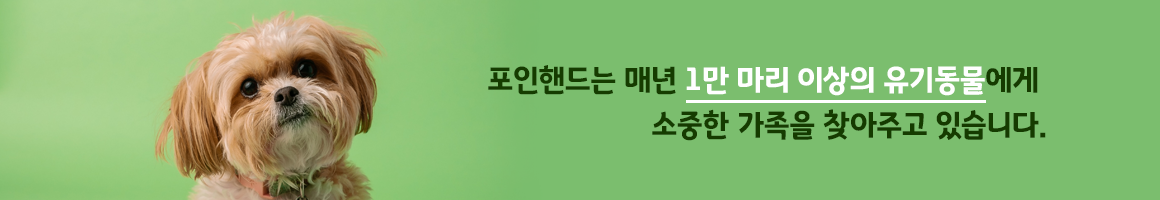
<style>
.page{position:relative;width:1160px;height:200px;background:#7bbe6e}
.page>*{position:absolute;margin:0}
.t1{font:31.8px/45px "GyeonggiTitleB";color:#153b00;scale:0.94 1}
.t2{font:31.8px/45px "GyeonggiTitleB";color:#153c00;scale:0.94 1}
.t3{font:31.8px/45px "GyeonggiTitleB";color:#ffffff;scale:0.94 1}
</style>
<div class="page">
<p class="t1" style="left:488px;top:65px;width:558px;height:76px;text-align:right"><span class="t2">포인핸드는 매년 </span><span class="t3">1만 마리 이상의 유기동물</span>에게 <br>소중한 가족을 찾아주고 있습니다.</p>
</div>
